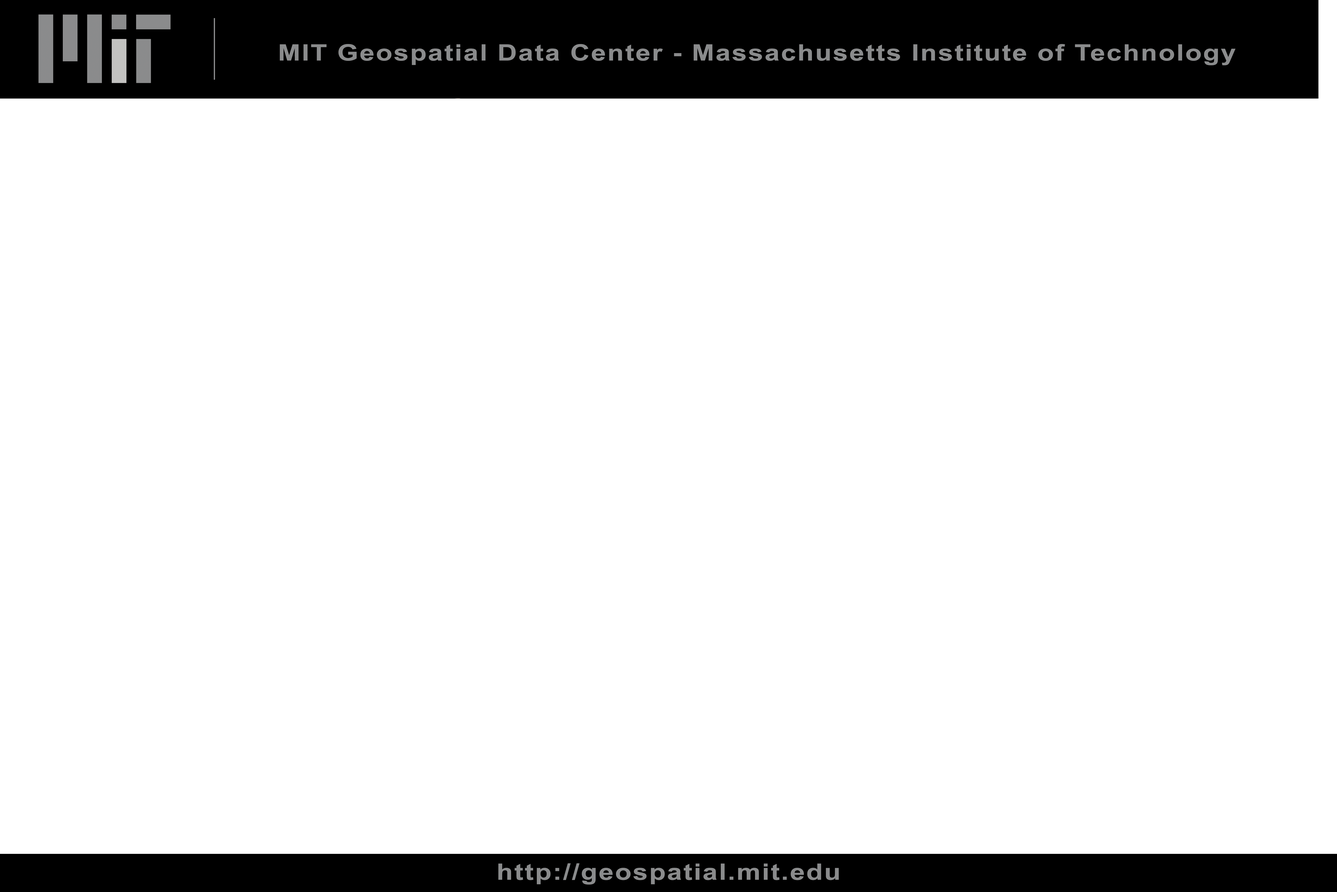
<style>
.page{position:relative;width:1337px;height:892px;background:#ffffff}
.page>*{position:absolute;margin:0}
.t1{font:22.5px "Arial-BoldMT";letter-spacing:0.05em;color:#8a8b8c;scale:1.2 1}
</style>
<div class="page">
<p class="t1" style="left:280px;top:44px;width:956px;height:21px">MIT Geospatial Data Center - Massachusetts Institute of Technology</p>
<p class="t1" style="left:498px;top:863px;width:341px;height:21px">http://geospatial.mit.edu</p>
</div>
